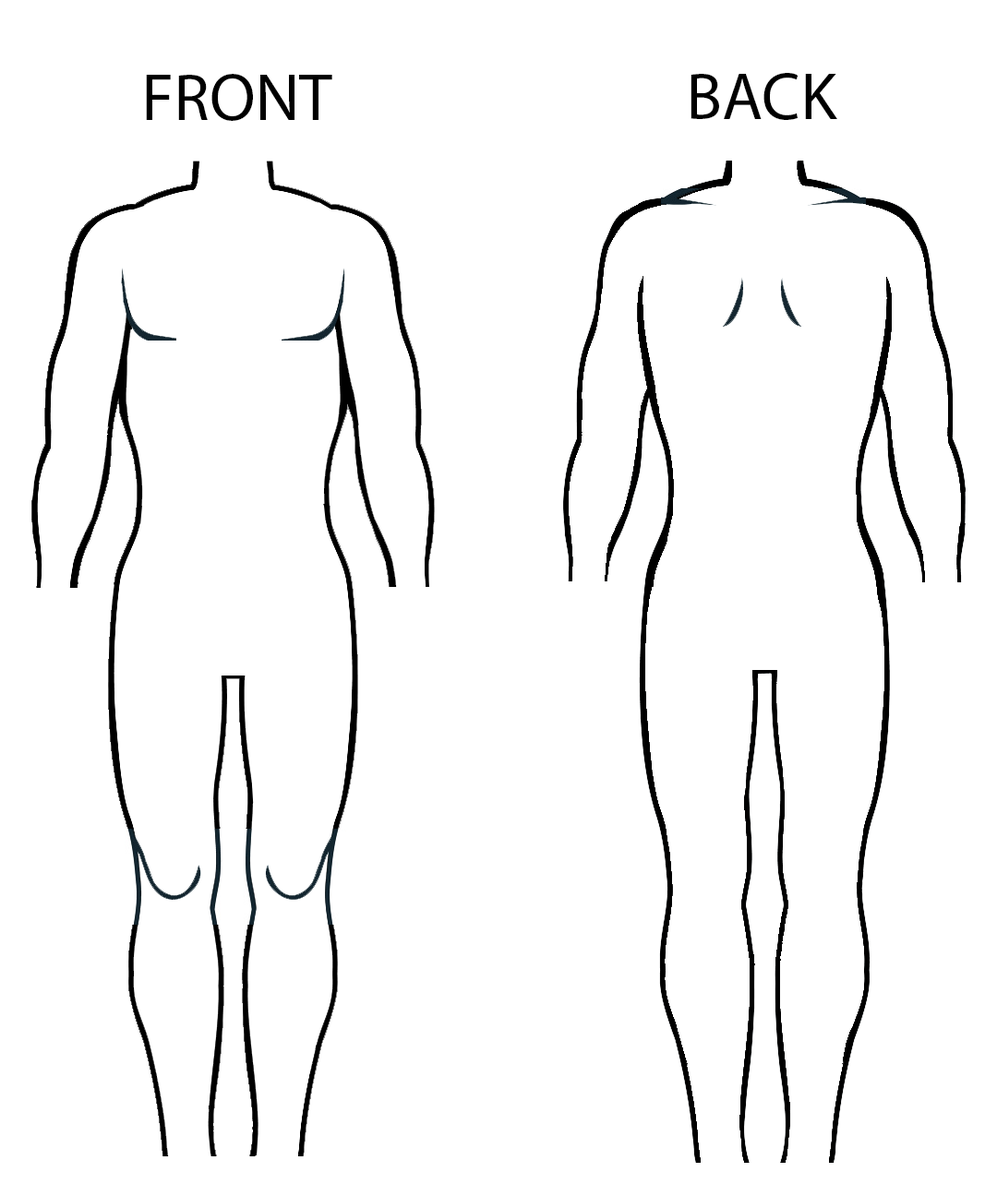
<style>
.page{position:relative;width:997px;height:1196px;background:#ffffff}
.page>*{position:absolute;margin:0}
.t1{font:66.5px "MyriadPro-Regular";color:#000000}
</style>
<div class="page">
<p class="t1" style="left:146px;top:74px;width:186px;height:47px">FRONT</p>
<p class="t1" style="left:690px;top:73px;width:147px;height:47px">BACK</p>
</div>
